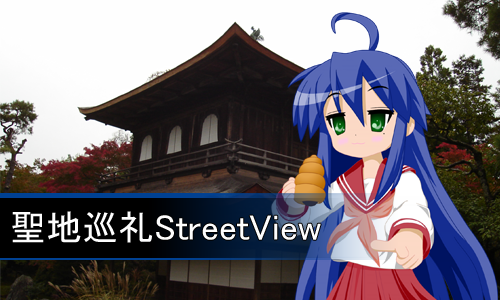
<style>
.page{position:relative;width:500px;height:300px}
.page>*{position:absolute;margin:0}
.t1{font:36px "MS-PGothic";color:#fefefe}
</style>
<div class="page">
<p class="t1" style="left:12px;top:211px;width:309px;height:32px">聖地巡礼StreetView</p>
</div>
